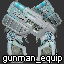
<style>
.page{position:relative;width:64px;height:64px;background:#333333}
.page>*{position:absolute;margin:0}
.t1{font:9px "ArialMT";color:#ffffff}
</style>
<div class="page">
<p class="t1" style="left:3px;top:54px;width:59px;height:9px">gunman_equip</p>
</div>
